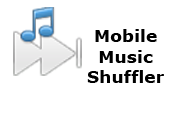
<style>
.page{position:relative;width:180px;height:120px;background:#ffffff}
.page>*{position:absolute;margin:0}
.t1{font:17.3px "Verdana-Bold";color:#000000}
</style>
<div class="page">
<p class="t1" style="left:87px;top:29px;width:77px;height:54px;text-align:center">Mobile<br>Music<br>Shuffler</p>
</div>
